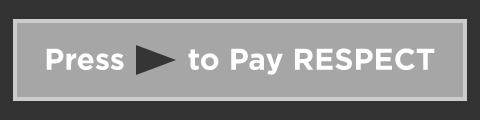
<style>
.page{position:relative;width:480px;height:120px;background:#a6a6a6}
.page>*{position:absolute;margin:0}
.t1{font:30px "Gotham-Bold";color:#ffffff}
</style>
<div class="page">
<p class="t1" style="left:46px;top:48px;width:389px;height:27px">Press       to Pay RESPECT</p>
</div>
